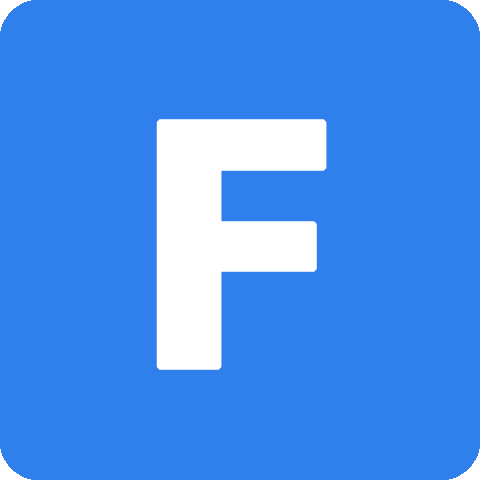
<style>
.page{position:relative;width:480px;height:480px;background:#2f80ed}
.page>*{position:absolute;margin:0}
.t1{font:345.4px "Roboto-Black";color:#ffffff;font-weight:bold}
</style>
<div class="page">
<p class="t1" style="left:156px;top:119px;width:171px;height:251px">F</p>
</div>
